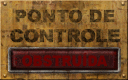
<style>
.page{position:relative;width:128px;height:80px}
.page>*{position:absolute;margin:0}
.t1{font:17.2px "Arial-Black";letter-spacing:-0.005em;color:#523c1c;font-weight:bold}
.t2{font:17.7px "Arial-Black";letter-spacing:-0.045em;font-weight:bold;scale:1.04 1}
.t3{font:14.5px "Arial-Black";color:#650302;scale:0.9 1}
</style>
<div class="page">
<p class="t1" style="left:15px;top:9px;width:100px;height:14px">PONTO DE</p>
<p class="t2" style="left:10px;top:29px;width:110px;height:14px">CONTROLE</p>
<p class="t3" style="left:22px;top:52px;width:86px;height:15px">OBSTRUÍDA</p>
</div>
